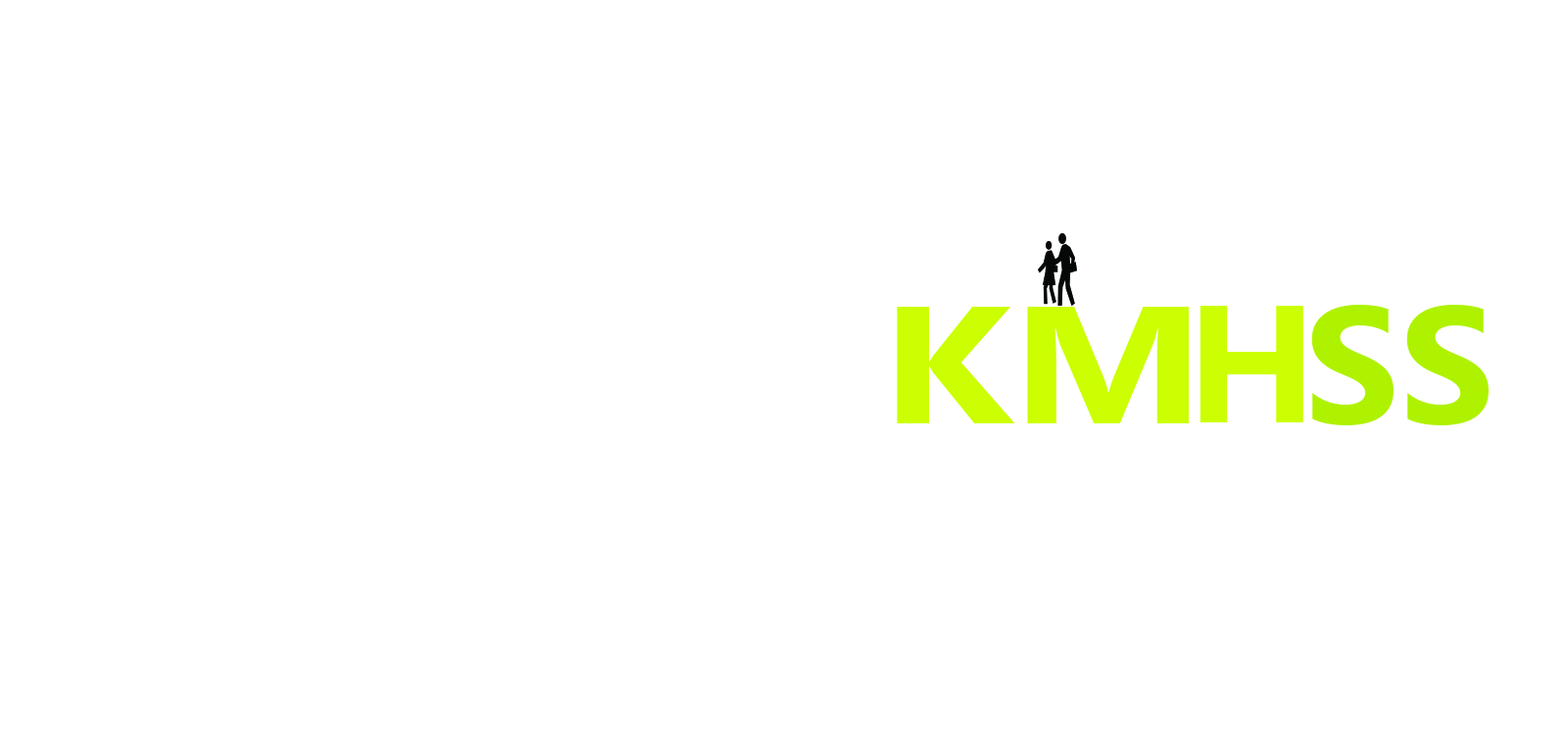
<style>
.page{position:relative;width:1568px;height:734px;background:#ffffff}
.page>*{position:absolute;margin:0}
.t1{font:167px "NirmalaUI-Bold";color:#cbff02}
.t2{font:167px "NirmalaUI-Bold";color:#aff200}
.t3{font:167px "NirmalaUI-Bold";color:#cbff02;scale:1.21 1}
</style>
<div class="page">
<p class="t1" style="left:1200px;top:306px;width:103px;height:116px">H</p>
<p class="t2" style="left:1311px;top:305px;width:178px;height:120px">SS</p>
<p class="t3" style="left:897px;top:307px;width:292px;height:116px">KM</p>
</div>
